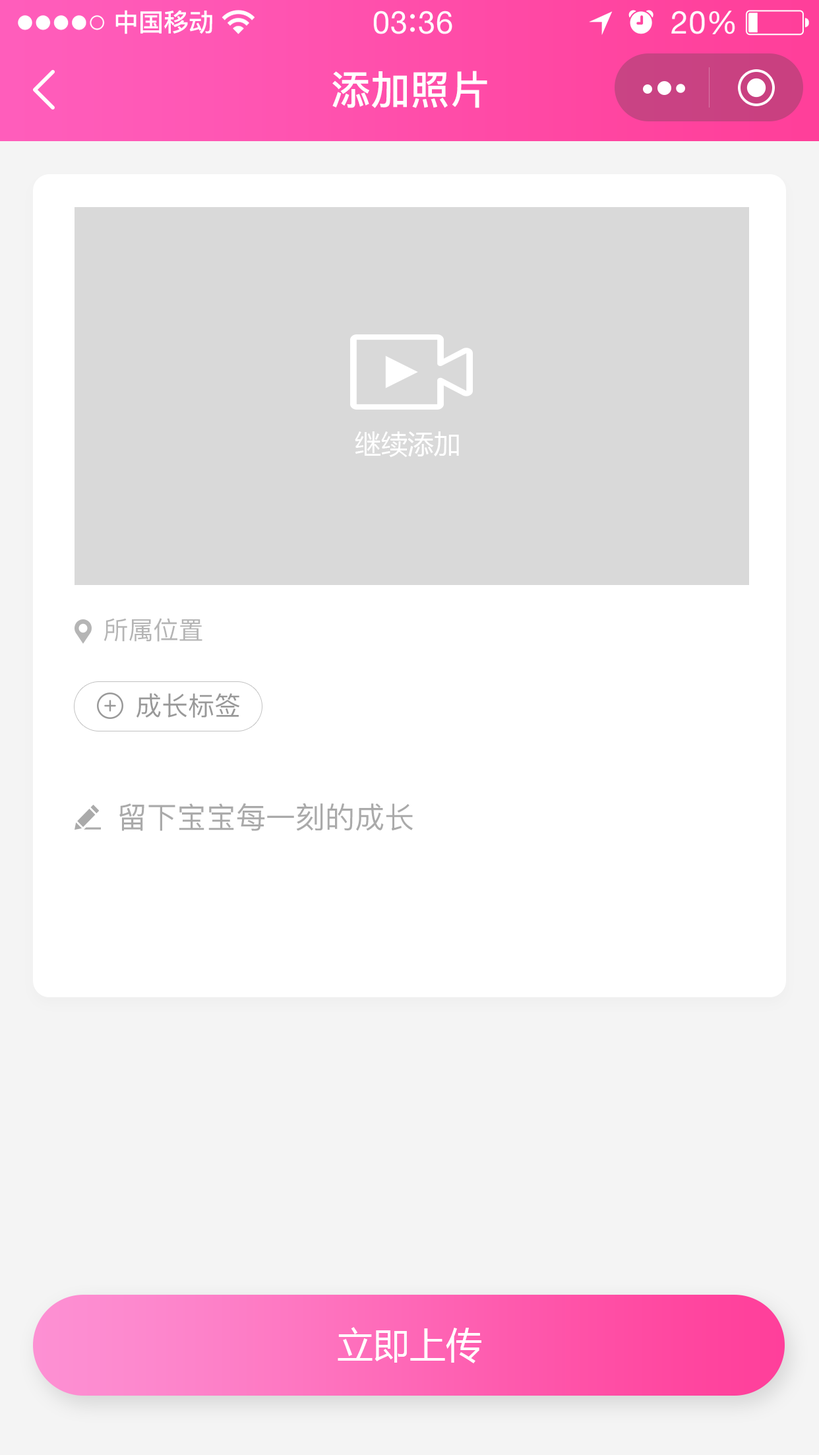
<style>
.page{position:relative;width:819px;height:1455px;background:#ffffff}
.page>*{position:absolute;margin:0}
.t1{font:39.6px "PingFang-SC-Bold";color:#ffffff}
.t2{font:26.4px "MicrosoftYaHei";color:#ffffff}
.t3{font:25.1px "PingFang-SC-Medium";color:#b5b5b5}
.t4{font:26.4px "PingFang-SC-Medium";color:#999999}
.t5{font:29.7px "PingFang-SC-Medium";color:#aaaaaa}
.t6{font:36.3px "MicrosoftYaHei";color:#ffffff}
</style>
<div class="page">
<p class="t1" style="left:332px;top:71px;width:156px;height:37px">添加照片</p>
<p class="t2" style="left:355px;top:431px;width:104px;height:26px">继续添加</p>
<p class="t3" style="left:104px;top:618px;width:99px;height:24px">所属位置</p>
<p class="t4" style="left:137px;top:693px;width:103px;height:25px">成长标签</p>
<p class="t5" style="left:119px;top:804px;width:294px;height:27px">留下宝宝每一刻的成长</p>
<p class="t6" style="left:338px;top:1327px;width:144px;height:37px">立即上传</p>
</div>
